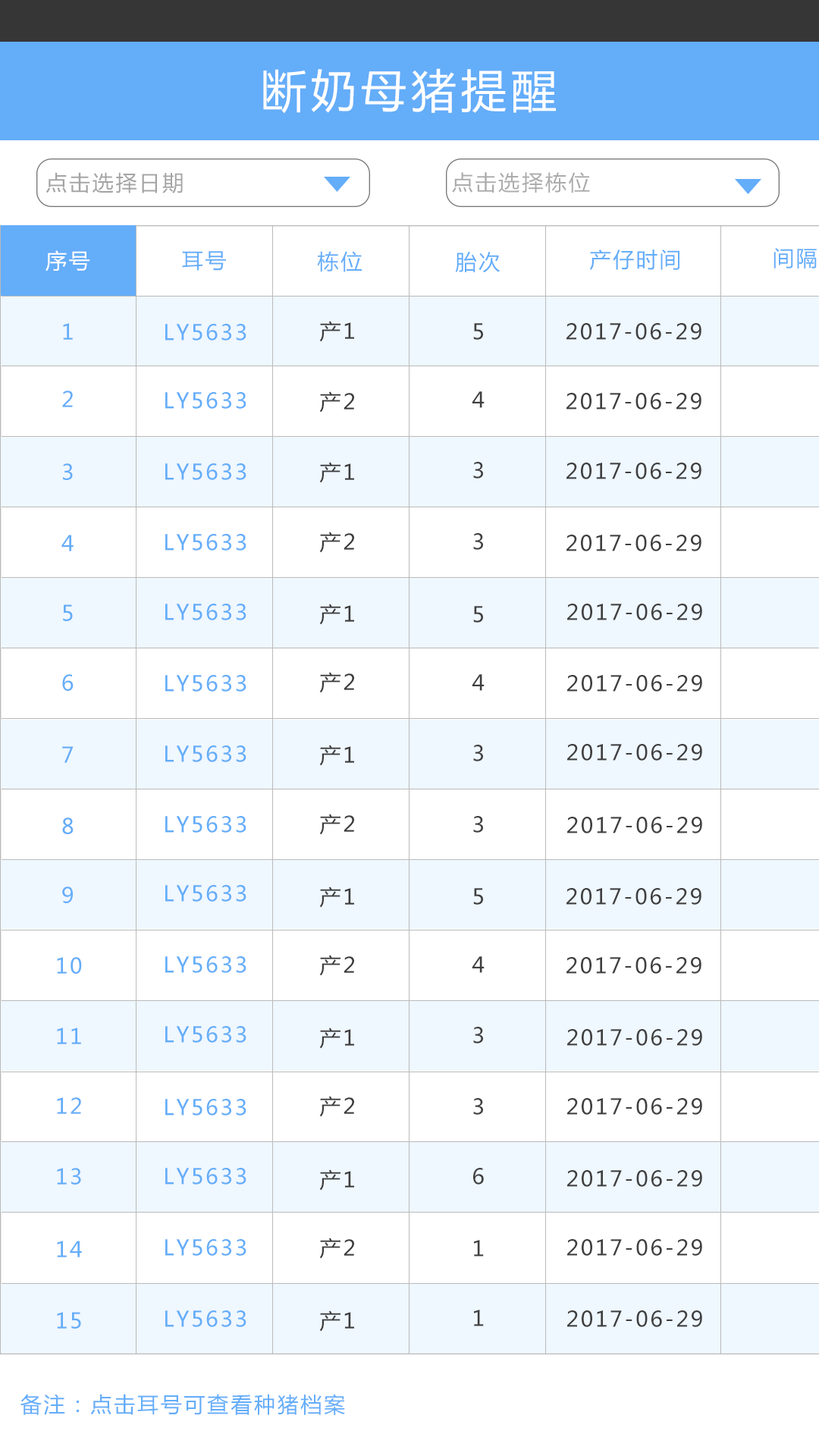
<style>
.page{position:relative;width:819px;height:1456px;background:#ffffff}
.page>*{position:absolute;margin:0}
.t1{font:45.5px "MicrosoftYaHei";letter-spacing:0.1em;color:#ffffff}
.t2{font:21.2px "MicrosoftYaHei";letter-spacing:0.1em;color:#a4a4a4}
.t3{font:21.2px "MicrosoftYaHei";letter-spacing:0.1em;color:#acacac}
.t4{font:21.2px "MicrosoftYaHei";letter-spacing:0.1em;color:#ffffff}
.t5{font:21.2px "MicrosoftYaHei";letter-spacing:0.1em;color:#64adf9}
.t6{font:21.2px "MicrosoftYaHei";letter-spacing:0.1em;color:#3c3c3c}
.t7{font:21.2px "MicrosoftYaHei";letter-spacing:0.1em;color:#3f3f3f}
</style>
<div class="page">
<p class="t1" style="left:263px;top:68px;width:293px;height:46px">断奶母猪提醒</p>
<p class="t2" style="left:45px;top:172px;width:138px;height:21px">点击选择日期</p>
<p class="t3" style="left:452px;top:172px;width:138px;height:21px">点击选择栋位</p>
<p class="t4" style="left:45px;top:250px;width:45px;height:21px">序号</p>
<p class="t5" style="left:182px;top:251px;width:44px;height:20px">耳号</p>
<p class="t5" style="left:317px;top:251px;width:45px;height:21px">栋位</p>
<p class="t5" style="left:455px;top:252px;width:45px;height:21px">胎次</p>
<p class="t5" style="left:589px;top:249px;width:90px;height:21px">产仔时间</p>
<p class="t5" style="left:773px;top:248px;width:44px;height:20px">间隔</p>
<p class="t5" style="left:63px;top:323px;width:10px;height:17px">1</p>
<p class="t5" style="left:165px;top:324px;width:81px;height:16px">LY5633</p>
<p class="t6" style="left:319px;top:321px;width:35px;height:21px">产1</p>
<p class="t7" style="left:473px;top:323px;width:10px;height:17px">5</p>
<p class="t7" style="left:566px;top:323px;width:135px;height:17px">2017-06-29</p>
<p class="t5" style="left:62px;top:391px;width:11px;height:16px">2</p>
<p class="t5" style="left:165px;top:392px;width:81px;height:17px">LY5633</p>
<p class="t6" style="left:319px;top:391px;width:35px;height:22px">产2</p>
<p class="t7" style="left:472px;top:391px;width:13px;height:17px">4</p>
<p class="t7" style="left:566px;top:393px;width:135px;height:16px">2017-06-29</p>
<p class="t6" style="left:319px;top:462px;width:35px;height:21px">产1</p>
<p class="t7" style="left:473px;top:462px;width:10px;height:17px">3</p>
<p class="t5" style="left:63px;top:463px;width:10px;height:17px">3</p>
<p class="t5" style="left:165px;top:463px;width:81px;height:17px">LY5633</p>
<p class="t7" style="left:566px;top:463px;width:135px;height:16px">2017-06-29</p>
<p class="t5" style="left:165px;top:534px;width:81px;height:17px">LY5633</p>
<p class="t6" style="left:319px;top:532px;width:35px;height:21px">产2</p>
<p class="t7" style="left:473px;top:533px;width:10px;height:17px">3</p>
<p class="t5" style="left:61px;top:535px;width:13px;height:16px">4</p>
<p class="t7" style="left:566px;top:535px;width:135px;height:16px">2017-06-29</p>
<p class="t5" style="left:63px;top:604px;width:10px;height:17px">5</p>
<p class="t5" style="left:165px;top:604px;width:81px;height:16px">LY5633</p>
<p class="t6" style="left:319px;top:604px;width:35px;height:21px">产1</p>
<p class="t7" style="left:473px;top:606px;width:10px;height:17px">5</p>
<p class="t7" style="left:567px;top:604px;width:135px;height:16px">2017-06-29</p>
<p class="t5" style="left:62px;top:674px;width:12px;height:17px">6</p>
<p class="t5" style="left:165px;top:675px;width:81px;height:17px">LY5633</p>
<p class="t6" style="left:319px;top:672px;width:35px;height:21px">产2</p>
<p class="t7" style="left:472px;top:674px;width:13px;height:17px">4</p>
<p class="t7" style="left:567px;top:675px;width:135px;height:17px">2017-06-29</p>
<p class="t5" style="left:62px;top:746px;width:12px;height:17px">7</p>
<p class="t5" style="left:165px;top:745px;width:81px;height:17px">LY5633</p>
<p class="t6" style="left:319px;top:745px;width:35px;height:21px">产1</p>
<p class="t7" style="left:473px;top:745px;width:10px;height:16px">3</p>
<p class="t7" style="left:567px;top:744px;width:135px;height:17px">2017-06-29</p>
<p class="t5" style="left:62px;top:817px;width:12px;height:17px">8</p>
<p class="t5" style="left:165px;top:816px;width:81px;height:17px">LY5633</p>
<p class="t6" style="left:319px;top:814px;width:35px;height:21px">产2</p>
<p class="t7" style="left:473px;top:816px;width:10px;height:17px">3</p>
<p class="t7" style="left:567px;top:817px;width:135px;height:16px">2017-06-29</p>
<p class="t5" style="left:62px;top:886px;width:11px;height:17px">9</p>
<p class="t5" style="left:165px;top:885px;width:81px;height:17px">LY5633</p>
<p class="t6" style="left:319px;top:886px;width:35px;height:22px">产1</p>
<p class="t7" style="left:473px;top:888px;width:10px;height:17px">5</p>
<p class="t7" style="left:566px;top:888px;width:135px;height:17px">2017-06-29</p>
<p class="t5" style="left:57px;top:957px;width:25px;height:17px">10</p>
<p class="t5" style="left:165px;top:956px;width:81px;height:17px">LY5633</p>
<p class="t6" style="left:319px;top:955px;width:35px;height:21px">产2</p>
<p class="t7" style="left:472px;top:956px;width:13px;height:17px">4</p>
<p class="t7" style="left:566px;top:957px;width:135px;height:17px">2017-06-29</p>
<p class="t5" style="left:57px;top:1028px;width:24px;height:16px">11</p>
<p class="t5" style="left:165px;top:1026px;width:81px;height:17px">LY5633</p>
<p class="t6" style="left:319px;top:1028px;width:35px;height:21px">产1</p>
<p class="t7" style="left:473px;top:1027px;width:10px;height:16px">3</p>
<p class="t7" style="left:567px;top:1029px;width:135px;height:17px">2017-06-29</p>
<p class="t5" style="left:57px;top:1097px;width:24px;height:17px">12</p>
<p class="t6" style="left:319px;top:1096px;width:35px;height:21px">产2</p>
<p class="t5" style="left:165px;top:1099px;width:81px;height:16px">LY5633</p>
<p class="t7" style="left:473px;top:1098px;width:10px;height:17px">3</p>
<p class="t7" style="left:567px;top:1098px;width:135px;height:17px">2017-06-29</p>
<p class="t5" style="left:57px;top:1168px;width:24px;height:17px">13</p>
<p class="t5" style="left:165px;top:1168px;width:81px;height:17px">LY5633</p>
<p class="t6" style="left:319px;top:1169px;width:35px;height:22px">产1</p>
<p class="t7" style="left:473px;top:1168px;width:11px;height:17px">6</p>
<p class="t7" style="left:567px;top:1170px;width:135px;height:17px">2017-06-29</p>
<p class="t5" style="left:57px;top:1241px;width:25px;height:16px">14</p>
<p class="t5" style="left:165px;top:1239px;width:81px;height:17px">LY5633</p>
<p class="t6" style="left:319px;top:1238px;width:35px;height:21px">产2</p>
<p class="t7" style="left:474px;top:1240px;width:10px;height:17px">1</p>
<p class="t7" style="left:567px;top:1239px;width:135px;height:17px">2017-06-29</p>
<p class="t5" style="left:57px;top:1312px;width:24px;height:17px">15</p>
<p class="t5" style="left:165px;top:1310px;width:81px;height:17px">LY5633</p>
<p class="t6" style="left:319px;top:1310px;width:35px;height:22px">产1</p>
<p class="t7" style="left:474px;top:1310px;width:10px;height:16px">1</p>
<p class="t7" style="left:567px;top:1310px;width:135px;height:17px">2017-06-29</p>
<p class="t5" style="left:20px;top:1394px;width:325px;height:21px">备注：点击耳号可查看种猪档案</p>
</div>
